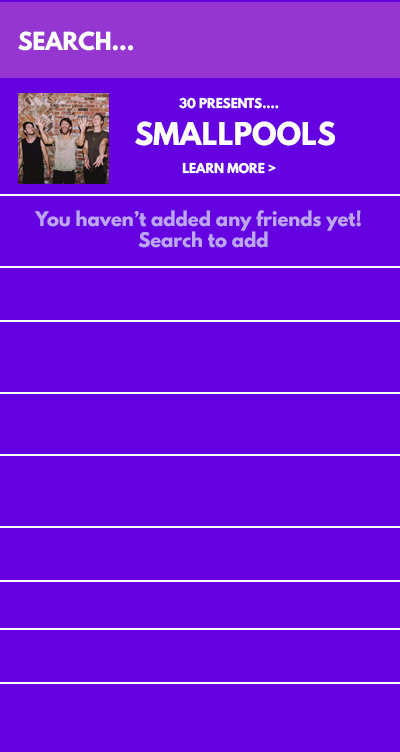
<style>
.page{position:relative;width:400px;height:752px;background:#6500e1}
.page>*{position:absolute;margin:0}
.t1{font:21.9px "LeagueSpartan-Bold";color:#ffffff}
.t2{font:12px "LeagueSpartan-Bold";color:#ffffff}
.t3{font:28px "LeagueSpartan-Bold";color:#ffffff}
.t4{font:18px "LeagueSpartan-Bold";color:#bda5f1}
</style>
<div class="page">
<p class="t1" style="left:18px;top:31px;width:115px;height:20px">SEARCH...</p>
<p class="t2" style="left:179px;top:97px;width:100px;height:12px">30 PRESENTS....</p>
<p class="t3" style="left:135px;top:121px;width:200px;height:25px">SMALLPOOLS</p>
<p class="t2" style="left:182px;top:162px;width:94px;height:12px">LEARN MORE &gt;</p>
<p class="t4" style="left:34px;top:210px;width:327px;height:38px;text-align:center">You haven’t added any friends yet!  <br>Search to add</p>
</div>
